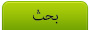
<style>
.page{position:relative;width:90px;height:30px}
.page>*{position:absolute;margin:0}
.t1{font:20px "AdobeArabic-Regular";color:#0c0c0c}
</style>
<div class="page">
<p class="t1" style="left:33px;top:9px;width:25px;height:15px">بحث</p>
</div>
